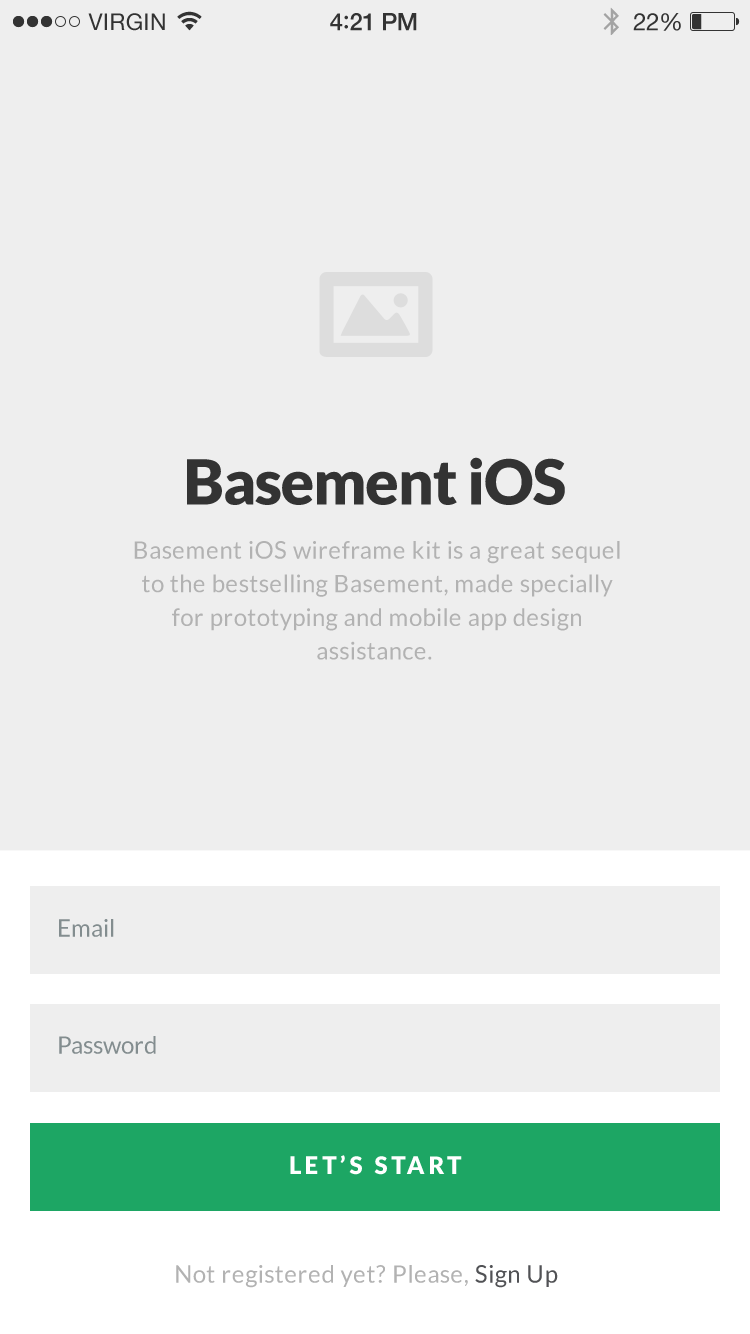
<style>
.page{position:relative;width:750px;height:1334px;background:#eeeeee}
.page>*{position:absolute;margin:0}
.t1{font:62px "Lato-Black";letter-spacing:-0.02em;color:#333333}
.t2{font:24px/33.6px "Lato-Regular";letter-spacing:0.02em;color:#b2b2b2}
.t3{font:24px "Lato-Regular";color:#838d8f}
.t4{font:24px "Lato-Black";letter-spacing:0.15em;color:#ffffff}
.t5{font:24px "Lato-Regular";letter-spacing:0.02em;color:#b2b2b2}
.t6{font:24px "Lato-Regular";letter-spacing:0.02em;color:#515255}
</style>
<div class="page">
<p class="t1" style="left:187px;top:457px;width:378px;height:48px">Basement iOS</p>
<p class="t2" style="left:134px;top:541px;width:486px;height:119px;text-align:center">Basement iOS wireframe kit is a great sequel<br>to the bestselling Basement, made specially<br>for prototyping and mobile app design<br>assistance.</p>
<p class="t3" style="left:59px;top:919px;width:55px;height:18px">Email</p>
<p class="t3" style="left:59px;top:1036px;width:97px;height:18px">Password</p>
<p class="t4" style="left:290px;top:1155px;width:172px;height:20px">LET’S START</p>
<p class="t5" style="left:176px;top:1265px;width:382px;height:23px">Not registered yet? Please, <span class="t6">Sign Up</span></p>
</div>
